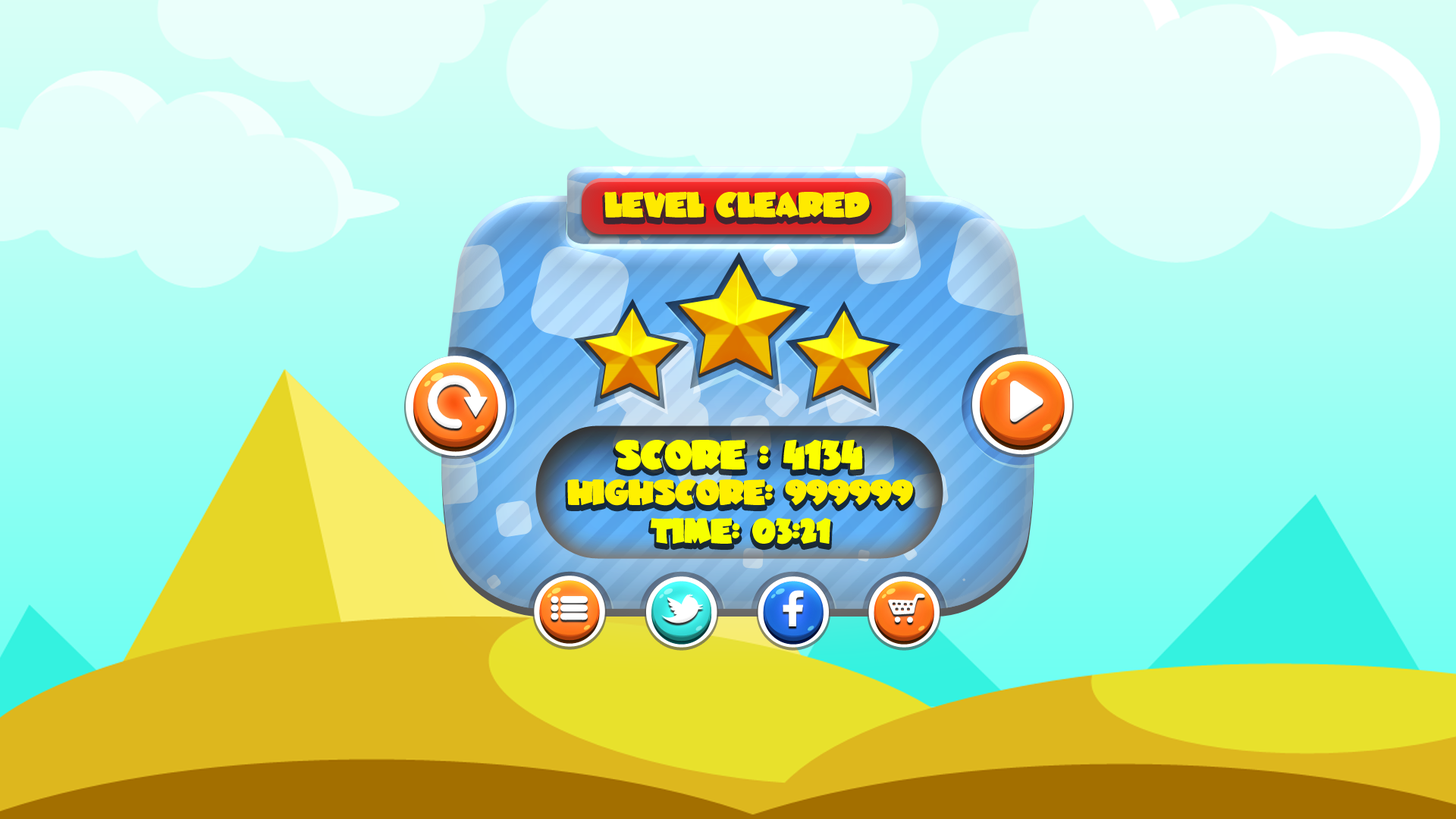
<style>
.page{position:relative;width:1456px;height:819px}
.page>*{position:absolute;margin:0}
.t1{font:25.8px "JuneBug";letter-spacing:-0.02em;color:#ffea00}
.t2{font:29.9px "JuneBug";letter-spacing:-0.02em;color:#fcff00}
.t3{font:25.6px "JuneBug";letter-spacing:-0.02em;color:#fff000}
.t4{font:25.6px "JuneBug";letter-spacing:-0.02em;color:#f6ff00}
</style>
<div class="page">
<p class="t1" style="left:604px;top:192px;width:266px;height:26px">LEVEL CLEARED</p>
<p class="t2" style="left:615px;top:440px;width:248px;height:30px">SCORE : 4134</p>
<p class="t3" style="left:567px;top:479px;width:346px;height:27px">HIGHSCORE: 999999</p>
<p class="t4" style="left:650px;top:518px;width:181px;height:26px">TIME: 03:21</p>
</div>
